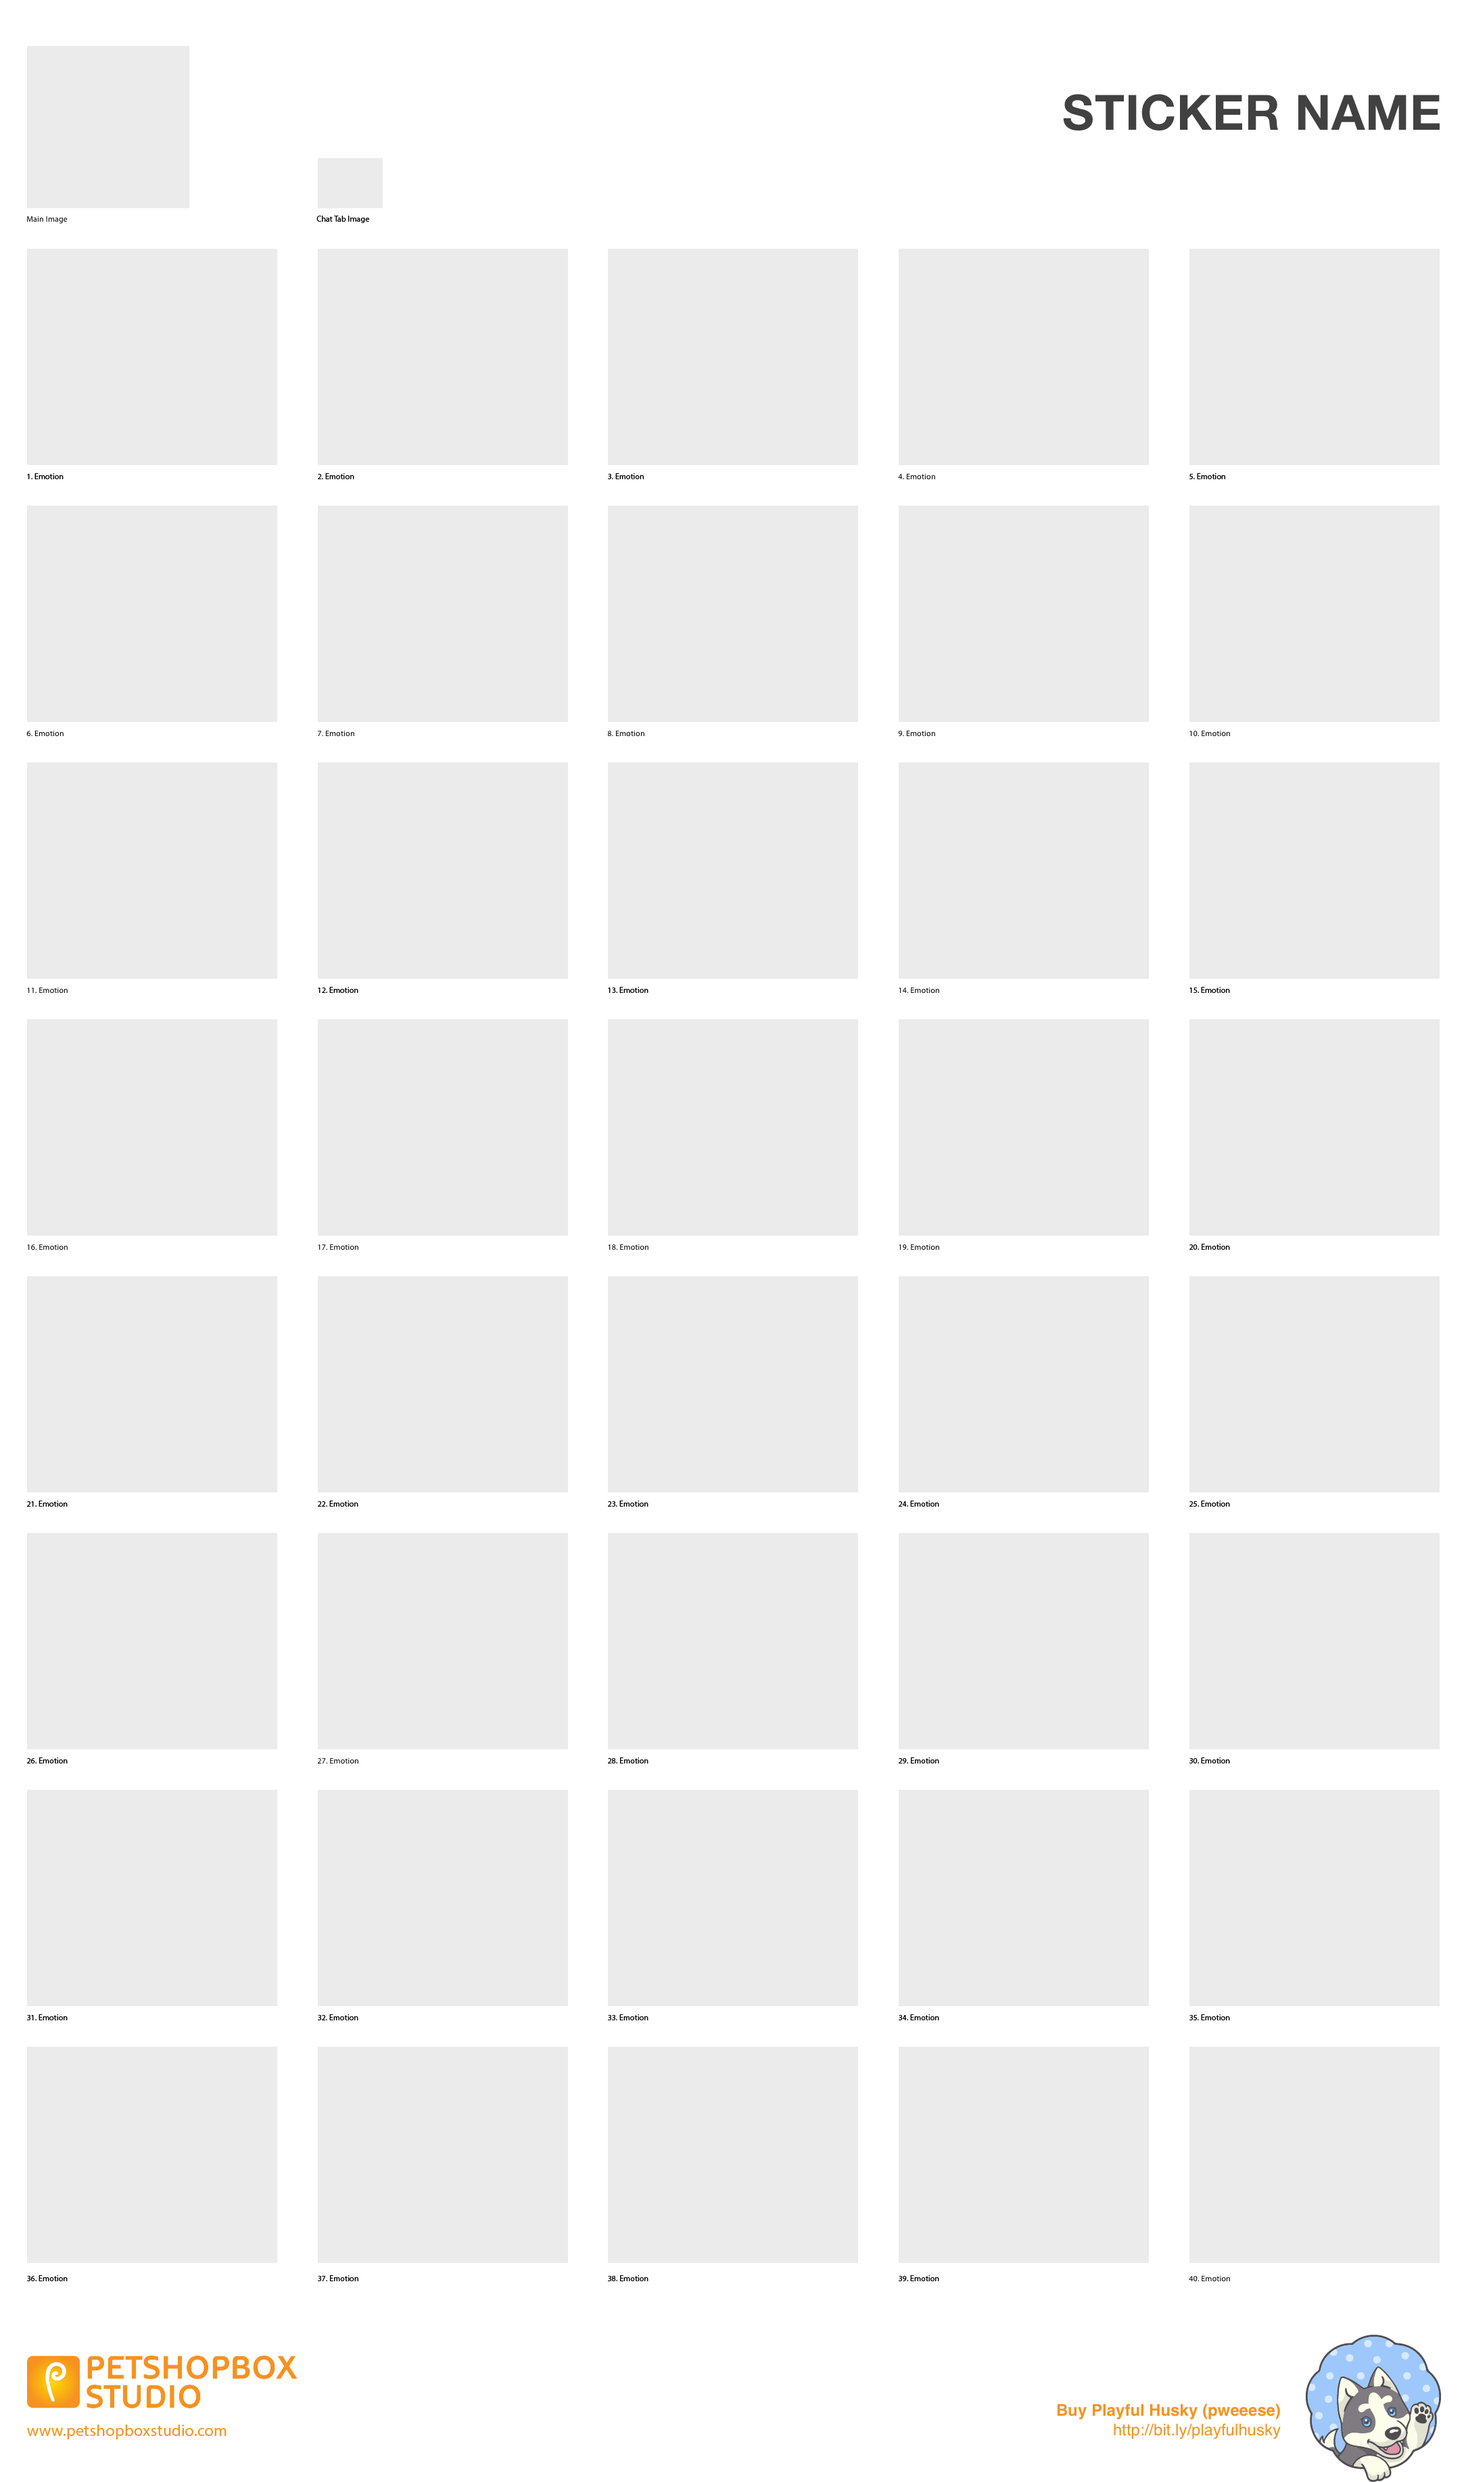
<style>
.page{position:relative;width:1466px;height:2482px;background:#ebebeb}
.page>*{position:absolute;margin:0}
.t1{font:48.7px "HelveticaNeue-Bold";letter-spacing:0.013em;color:#424242}
.t2{font:8.1px "MyriadPro-Regular";letter-spacing:0.013em;color:#000000}
.t3{font:16.2px "Helvetica-Bold";color:#f69220}
.t4{font:16.2px "Helvetica";color:#f69220}
.t5{font:16.2px "MyriadPro-Regular";letter-spacing:0.013em;color:#f69220}
</style>
<div class="page">
<p class="t1" style="left:1063px;top:94px;width:376px;height:37px">STICKER NAME</p>
<p class="t2" style="left:27px;top:216px;width:41px;height:8px">Main Image</p>
<p class="t2" style="left:316px;top:216px;width:53px;height:7px">Chat Tab Image</p>
<p class="t2" style="left:27px;top:473px;width:37px;height:6px">1. Emotion</p>
<p class="t2" style="left:318px;top:473px;width:36px;height:6px">2. Emotion</p>
<p class="t2" style="left:608px;top:473px;width:36px;height:6px">3. Emotion</p>
<p class="t2" style="left:898px;top:474px;width:37px;height:6px">4. Emotion</p>
<p class="t2" style="left:1189px;top:473px;width:36px;height:6px">5. Emotion</p>
<p class="t2" style="left:26px;top:731px;width:38px;height:6px">6. Emotion</p>
<p class="t2" style="left:318px;top:731px;width:36px;height:6px">7. Emotion</p>
<p class="t2" style="left:607px;top:731px;width:37px;height:6px">8. Emotion</p>
<p class="t2" style="left:898px;top:731px;width:37px;height:6px">9. Emotion</p>
<p class="t2" style="left:1189px;top:731px;width:41px;height:6px">10. Emotion</p>
<p class="t2" style="left:27px;top:988px;width:41px;height:6px">11. Emotion</p>
<p class="t2" style="left:318px;top:987px;width:40px;height:6px">12. Emotion</p>
<p class="t2" style="left:608px;top:987px;width:40px;height:6px">13. Emotion</p>
<p class="t2" style="left:898px;top:988px;width:41px;height:6px">14. Emotion</p>
<p class="t2" style="left:1189px;top:987px;width:41px;height:6px">15. Emotion</p>
<p class="t2" style="left:27px;top:1245px;width:41px;height:6px">16. Emotion</p>
<p class="t2" style="left:318px;top:1245px;width:40px;height:6px">17. Emotion</p>
<p class="t2" style="left:608px;top:1245px;width:40px;height:6px">18. Emotion</p>
<p class="t2" style="left:898px;top:1245px;width:41px;height:6px">19. Emotion</p>
<p class="t2" style="left:1189px;top:1244px;width:41px;height:6px">20. Emotion</p>
<p class="t2" style="left:27px;top:1501px;width:41px;height:6px">21. Emotion</p>
<p class="t2" style="left:318px;top:1501px;width:40px;height:6px">22. Emotion</p>
<p class="t2" style="left:608px;top:1501px;width:40px;height:6px">23. Emotion</p>
<p class="t2" style="left:898px;top:1501px;width:41px;height:6px">24. Emotion</p>
<p class="t2" style="left:1189px;top:1501px;width:41px;height:6px">25. Emotion</p>
<p class="t2" style="left:27px;top:1758px;width:41px;height:6px">26. Emotion</p>
<p class="t2" style="left:608px;top:1758px;width:40px;height:6px">28. Emotion</p>
<p class="t2" style="left:898px;top:1758px;width:41px;height:6px">29. Emotion</p>
<p class="t2" style="left:1189px;top:1758px;width:41px;height:6px">30. Emotion</p>
<p class="t2" style="left:317px;top:1758px;width:41px;height:6px">27. Emotion</p>
<p class="t2" style="left:27px;top:2015px;width:41px;height:6px">31. Emotion</p>
<p class="t2" style="left:318px;top:2015px;width:40px;height:6px">32. Emotion</p>
<p class="t2" style="left:608px;top:2015px;width:40px;height:6px">33. Emotion</p>
<p class="t2" style="left:898px;top:2015px;width:41px;height:6px">34. Emotion</p>
<p class="t2" style="left:1189px;top:2015px;width:41px;height:6px">35. Emotion</p>
<p class="t2" style="left:27px;top:2275px;width:41px;height:7px">36. Emotion</p>
<p class="t2" style="left:318px;top:2275px;width:40px;height:7px">37. Emotion</p>
<p class="t2" style="left:608px;top:2275px;width:40px;height:7px">38. Emotion</p>
<p class="t2" style="left:898px;top:2275px;width:41px;height:7px">39. Emotion</p>
<p class="t2" style="left:1188px;top:2276px;width:42px;height:6px">40. Emotion</p>
<p class="t3" style="left:1057px;top:2404px;width:223px;height:36px;text-align:right">Buy Playful Husky (pweeese)<br><span class="t4">http://bit.ly/playfulhusky</span></p>
<p class="t5" style="left:27px;top:2425px;width:199px;height:15px">www.petshopboxstudio.com</p>
</div>
